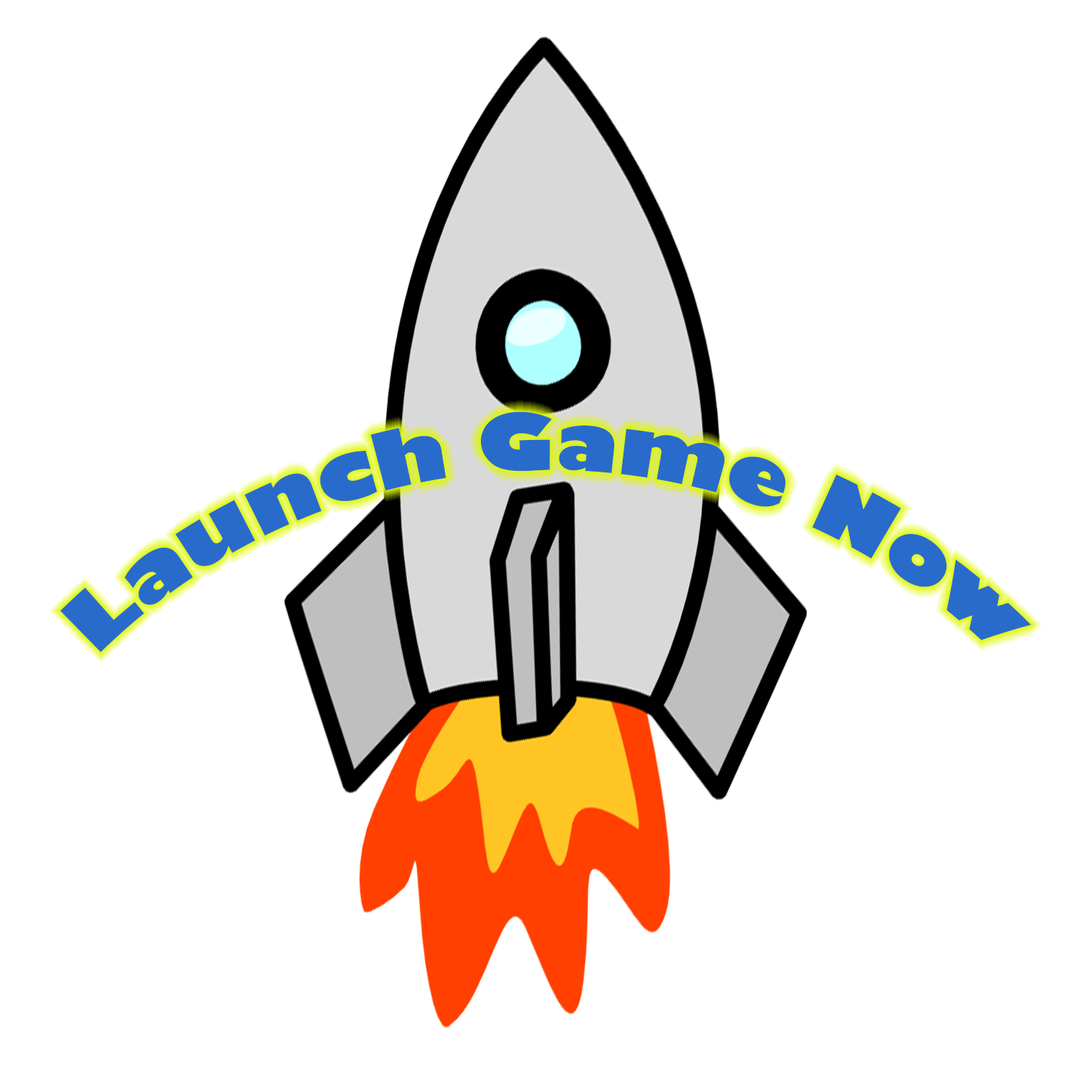
<style>
.page{position:relative;width:1092px;height:1092px;background:#ffffff}
.page>*{position:absolute;margin:0}
.t1{font:77.1px "GillSans-UltraBold";color:#296bcb}
</style>
<div class="page">
<p class="t1" style="left:60px;top:412px;width:971px;height:241px">Launch Game Now</p>
</div>
